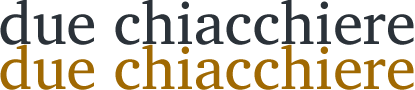
<style>
.page{position:relative;width:415px;height:90px;background:#ffffff}
.page>*{position:absolute;margin:0}
.t1{font:60px "CharisSIL";color:#2b3239}
.t2{font:60px "CharisSIL";color:#a06902}
</style>
<div class="page">
<p class="t1" style="left:0px;top:0px;width:414px;height:45px">due chiacchiere</p>
<p class="t2" style="left:0px;top:44px;width:414px;height:46px">due chiacchiere</p>
</div>
